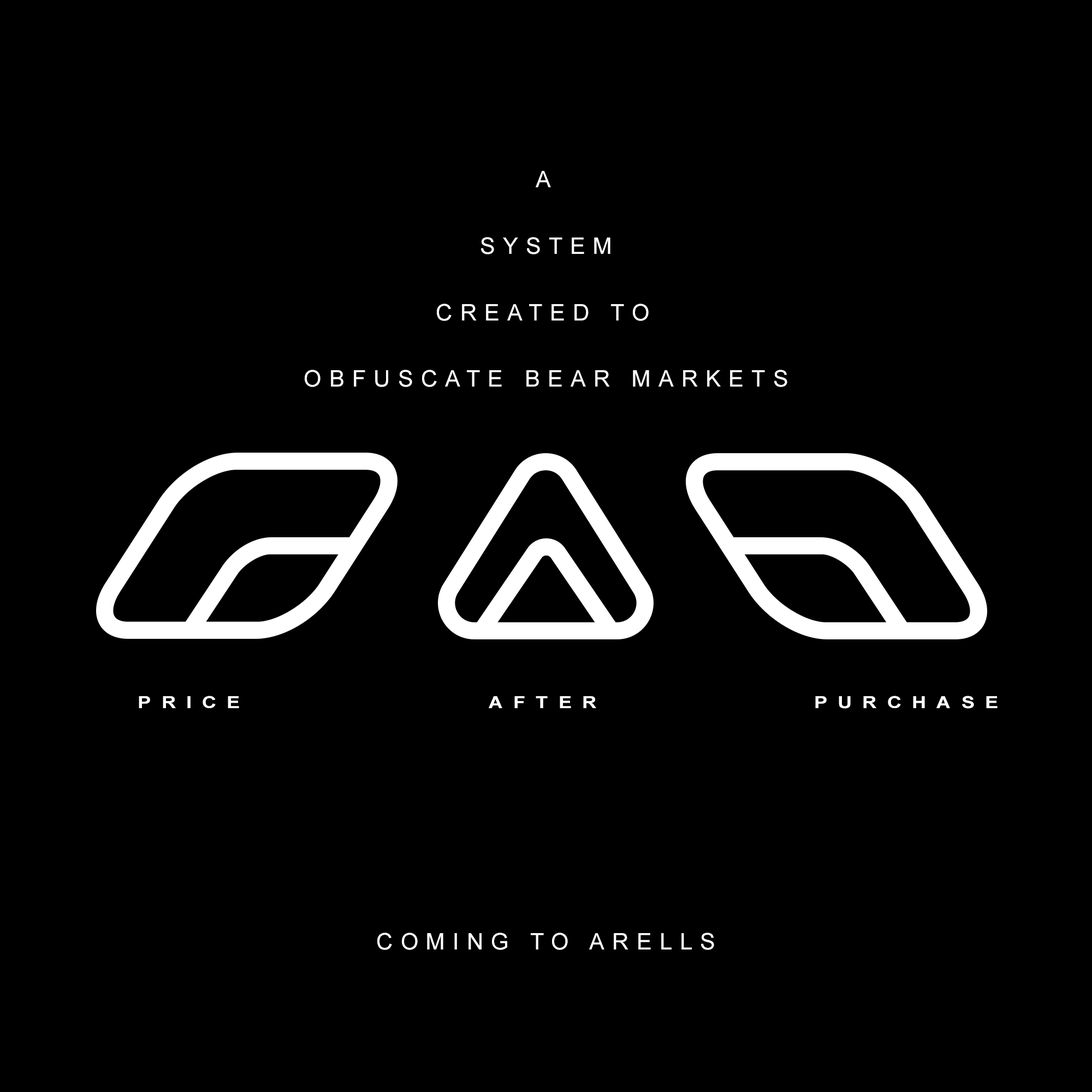
<style>
.page{position:relative;width:1092px;height:1092px;background:#000000}
.page>*{position:absolute;margin:0}
.t1{font:22.7px/66.5px "ArialMT";letter-spacing:0.34em;color:#ffffff}
.t2{font:16.8px "Arial-BoldMT";letter-spacing:0.52em;color:#ffffff;scale:1.19 1}
.t3{font:22.7px "ArialMT";letter-spacing:0.34em;color:#ffffff}
</style>
<div class="page">
<p class="t1" style="left:305px;top:171px;width:482px;height:216px;text-align:center">A <br>SYSTEM<br>CREATED TO <br>OBFUSCATE BEAR MARKETS</p>
<p class="t2" style="left:139px;top:696px;width:859px;height:13px">PRICE               AFTER             PURCHASE</p>
<p class="t3" style="left:377px;top:933px;width:337px;height:17px">COMING TO ARELLS</p>
</div>
